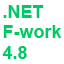
<style>
.page{position:relative;width:64px;height:64px;background:#ffffff}
.page>*{position:absolute;margin:0}
.t1{font:18px "Arial-BoldMT";color:#00c864}
</style>
<div class="page">
<p class="t1" style="left:2px;top:5px;width:60px;height:54px">.NET<br>F-work<br>4.8</p>
</div>
